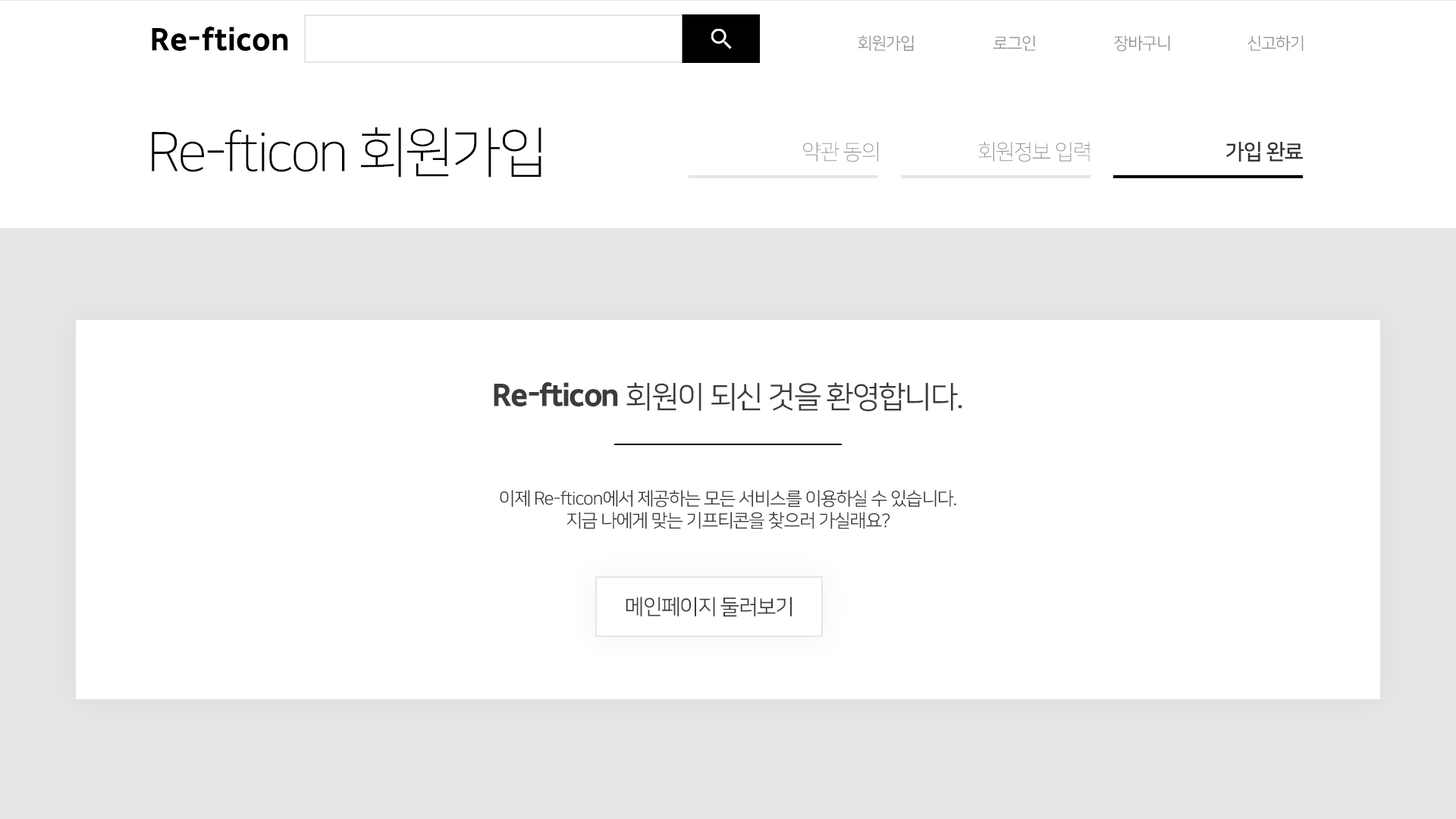
<style>
.page{position:relative;width:1456px;height:819px;background:#ffffff}
.page>*{position:absolute;margin:0}
.t1{font:30.3px "SDGothicNeoc-gExBd";color:#000000}
.t2{font:16.7px "NanumSquareOTFR";letter-spacing:-0.05em;color:#959595}
.t3{font:54.6px "NanumSquareOTFL";letter-spacing:-0.05em;color:#000000}
.t4{font:21.2px "NanumSquareOTFL";letter-spacing:-0.05em;color:#959595}
.t5{font:21.2px "NanumSquareOTFB";letter-spacing:-0.05em;color:#353535}
.t6{font:30.3px "NanumSquareOTFR";letter-spacing:-0.05em;color:#3c3c3c}
.t7{font:30.3px "SDGothicNeoc-gExBd";letter-spacing:-0.05em;color:#3c3c3c}
.t8{font:18.2px "NanumSquareOTFR";letter-spacing:-0.05em;color:#3c3c3c}
.t9{font:21.2px "NanumSquareOTFR";letter-spacing:-0.05em;color:#3c3c3c}
</style>
<div class="page">
<p class="t1" style="left:152px;top:27px;width:136px;height:25px">Re-fticon</p>
<p class="t2" style="left:858px;top:35px;width:56px;height:16px">회원가입</p>
<p class="t2" style="left:993px;top:36px;width:42px;height:15px">로그인</p>
<p class="t2" style="left:1114px;top:36px;width:56px;height:16px">장바구니</p>
<p class="t2" style="left:1247px;top:36px;width:57px;height:15px">신고하기</p>
<p class="t3" style="left:152px;top:127px;width:389px;height:50px">Re-fticon 회원가입</p>
<p class="t4" style="left:803px;top:142px;width:75px;height:20px">약관 동의</p>
<p class="t4" style="left:978px;top:142px;width:112px;height:20px">회원정보 입력</p>
<p class="t5" style="left:1226px;top:142px;width:77px;height:20px">가입 완료</p>
<p class="t6" style="left:494px;top:382px;width:468px;height:30px"><span class="t7">Re-fticon </span>회원이 되신 것을 환영합니다.</p>
<p class="t8" style="left:500px;top:490px;width:456px;height:39px;text-align:center">이제 Re-fticon에서 제공하는 모든 서비스를 이용하실 수 있습니다.<br>지금 나에게 맞는 기프티콘을 찾으러 가실래요?</p>
<p class="t9" style="left:626px;top:597px;width:166px;height:20px">메인페이지 둘러보기</p>
</div>
